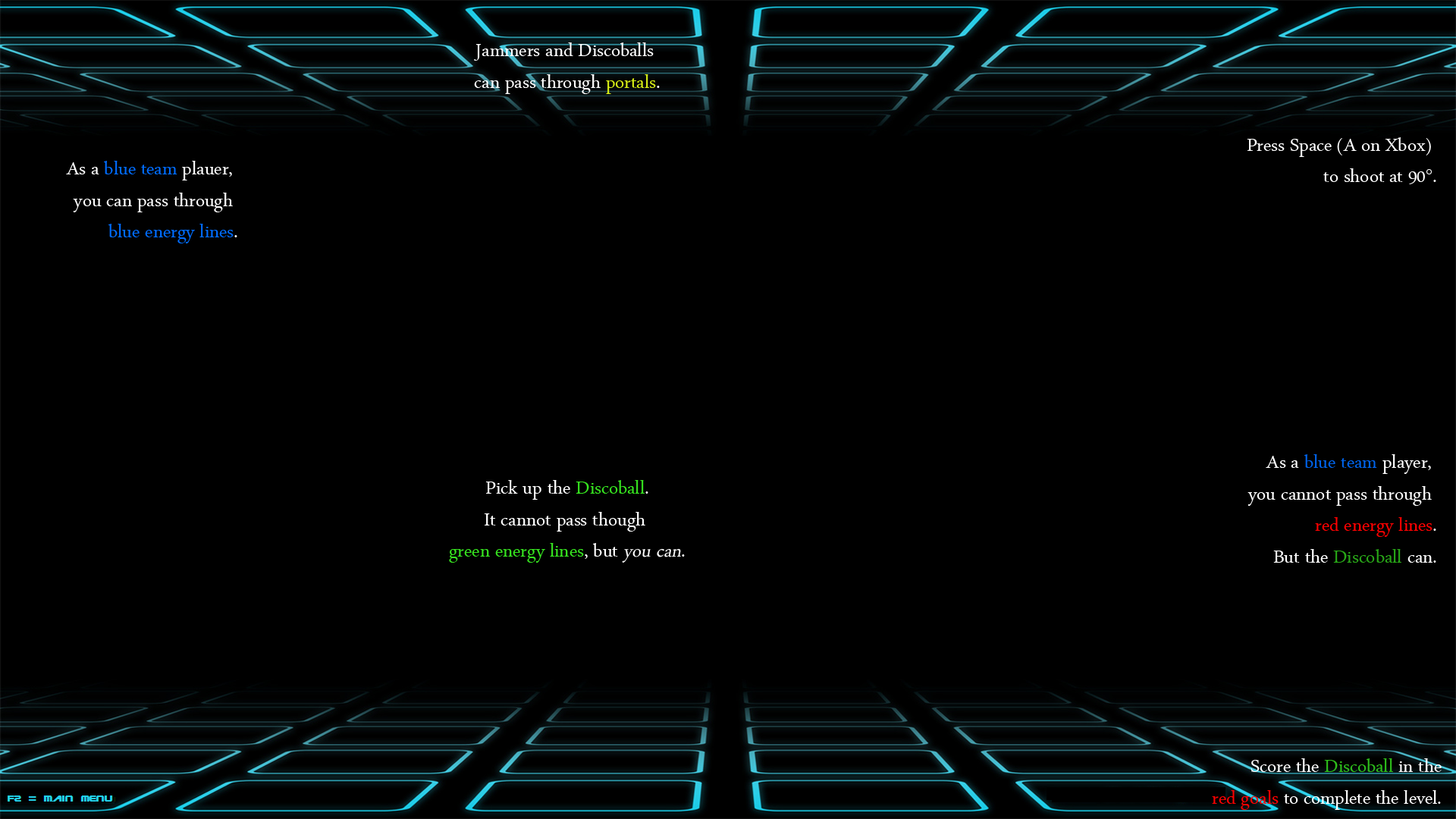
<style>
.page{position:relative;width:1456px;height:819px;background:#000000}
.page>*{position:absolute;margin:0}
.t1{font:26.3px "ArabicTypesetting";color:#ffffff}
.t2{font:26.3px "ArabicTypesetting";color:#d8ef16}
.t3{font:26.3px "ArabicTypesetting";color:#006cff}
.t4{font:26.3px "ArabicTypesetting";color:#0063ea}
.t5{font:26.3px "ArabicTypesetting";color:#fe0000}
.t6{font:26.3px "ArabicTypesetting";color:#28a717}
.t7{font:26.3px "ArabicTypesetting";color:#36e41f}
.t8{font:26.3px "ArabicTypesetting";color:#ffffff;font-style:italic}
.t9{font:26.3px "ArabicTypesetting";color:#2dbe1a}
.t10{font:26.3px "ArabicTypesetting";color:#ff0000}
</style>
<div class="page">
<p class="t1" style="left:474px;top:42px;width:186px;height:52px;text-align:center">Jammers and Discoballs <br>can pass through <span class="t2">portals</span>.</p>
<p class="t1" style="left:1247px;top:137px;width:189px;height:47px;text-align:right">Press Space (A on Xbox) <br>to shoot at 90°.</p>
<p class="t1" style="left:66px;top:161px;width:171px;height:82px;text-align:right">As a <span class="t3">blue team</span> plauer, <br>you can pass through <br><span class="t3">blue energy lines</span>.</p>
<p class="t1" style="left:1247px;top:454px;width:189px;height:109px;text-align:right">As a <span class="t4">blue team</span> player, <br>you cannot pass through <br><span class="t5">red energy lines</span>.<br>But the <span class="t6">Discoball</span> can.</p>
<p class="t1" style="left:449px;top:480px;width:236px;height:83px;text-align:center">Pick up the <span class="t7">Discoball</span>.<br>It cannot pass though <br><span class="t7">green energy lines</span>, but<span class="t8"> you can</span>.</p>
<p class="t1" style="left:1212px;top:758px;width:230px;height:52px;text-align:right">Score the <span class="t9">Discoball</span> in the<br><span class="t10">red goals</span> to complete the level.</p>
</div>
